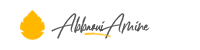
<style>
.page{position:relative;width:200px;height:50px;background:#ffffff}
.page>*{position:absolute;margin:0}
.t1{font:17.8px "Marquette";color:#555555}
</style>
<div class="page">
<p class="t1" style="left:51px;top:13px;width:99px;height:26px">AbbaouiAmine</p>
</div>
